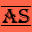
<style>
.page{position:relative;width:32px;height:32px;background:#ff6348}
.page>*{position:absolute;margin:0}
.t1{font:21.2px "Algerian";color:#010101}
</style>
<div class="page">
<p class="t1" style="left:2px;top:9px;width:28px;height:14px">AS</p>
</div>
